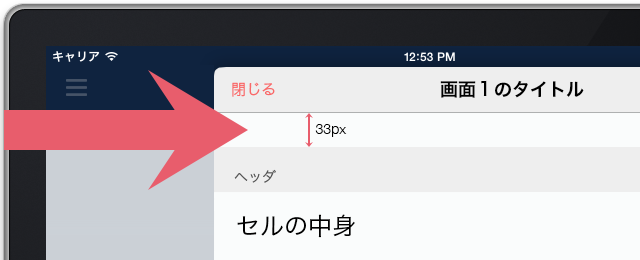
<style>
.page{position:relative;width:640px;height:260px;background:#fafcfc}
.page>*{position:absolute;margin:0}
.t1{font:15px "HiraKakuPro-W3";color:#f96969}
.t2{font:18px "HiraKakuPro-W6";color:#000000}
.t3{font:14px "HelveticaNeue-Light";color:#000000}
.t4{font:14px "HiraKakuPro-W3";color:#565656}
.t5{font:24px "HiraKakuPro-W3";color:#000000}
</style>
<div class="page">
<p class="t1" style="left:232px;top:82px;width:43px;height:15px">閉じる</p>
<p class="t2" style="left:440px;top:80px;width:144px;height:18px">画面１のタイトル</p>
<p class="t3" style="left:315px;top:124px;width:32px;height:13px">33px</p>
<p class="t4" style="left:234px;top:169px;width:42px;height:14px">ヘッダ</p>
<p class="t5" style="left:237px;top:214px;width:118px;height:24px">セルの中身</p>
</div>
